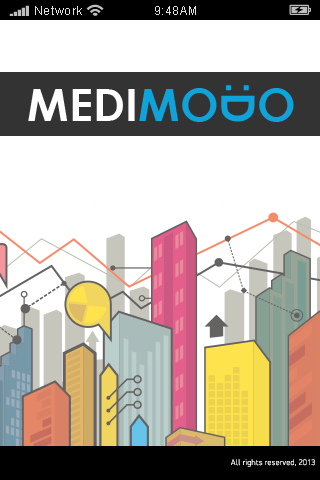
<style>
.page{position:relative;width:320px;height:480px;background:#ffffff}
.page>*{position:absolute;margin:0}
.t1{font:12px "ArialMT";letter-spacing:0.05em;color:#dfe4de}
.t2{font:8px "PFDinDisplayPro-Thin";letter-spacing:0.05em;color:#ffffff}
</style>
<div class="page">
<p class="t1" style="left:35px;top:6px;width:47px;height:9px">Network</p>
<p class="t1" style="left:155px;top:6px;width:41px;height:9px">9:48AM</p>
<p class="t2" style="left:231px;top:459px;width:84px;height:8px">All rights reserved, 2013</p>
</div>
